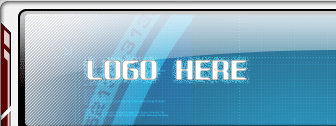
<style>
.page{position:relative;width:336px;height:126px}
.page>*{position:absolute;margin:0}
.t1{font:30px "Decipher"}
</style>
<div class="page">
<p class="t1" style="left:87px;top:60px;width:160px;height:20px">LOGO HERE</p>
</div>
